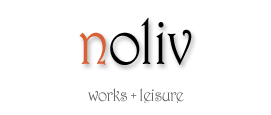
<style>
.page{position:relative;width:271px;height:115px;background:#ffffff}
.page>*{position:absolute;margin:0}
.t1{font:65px "Harrington";letter-spacing:-0.04em;color:#000000;scale:0.9 1}
.t2{font:65px "Harrington";letter-spacing:-0.04em;color:#d76035;scale:0.9 1}
.t3{font:18px "Harrington";letter-spacing:-0.04em;color:#666666;scale:0.9 1}
</style>
<div class="page">
<p class="t1" style="left:79px;top:17px;width:113px;height:48px"><span class="t2">n</span>oliv</p>
<p class="t3" style="left:88px;top:88px;width:96px;height:15px">works + leisure</p>
</div>
